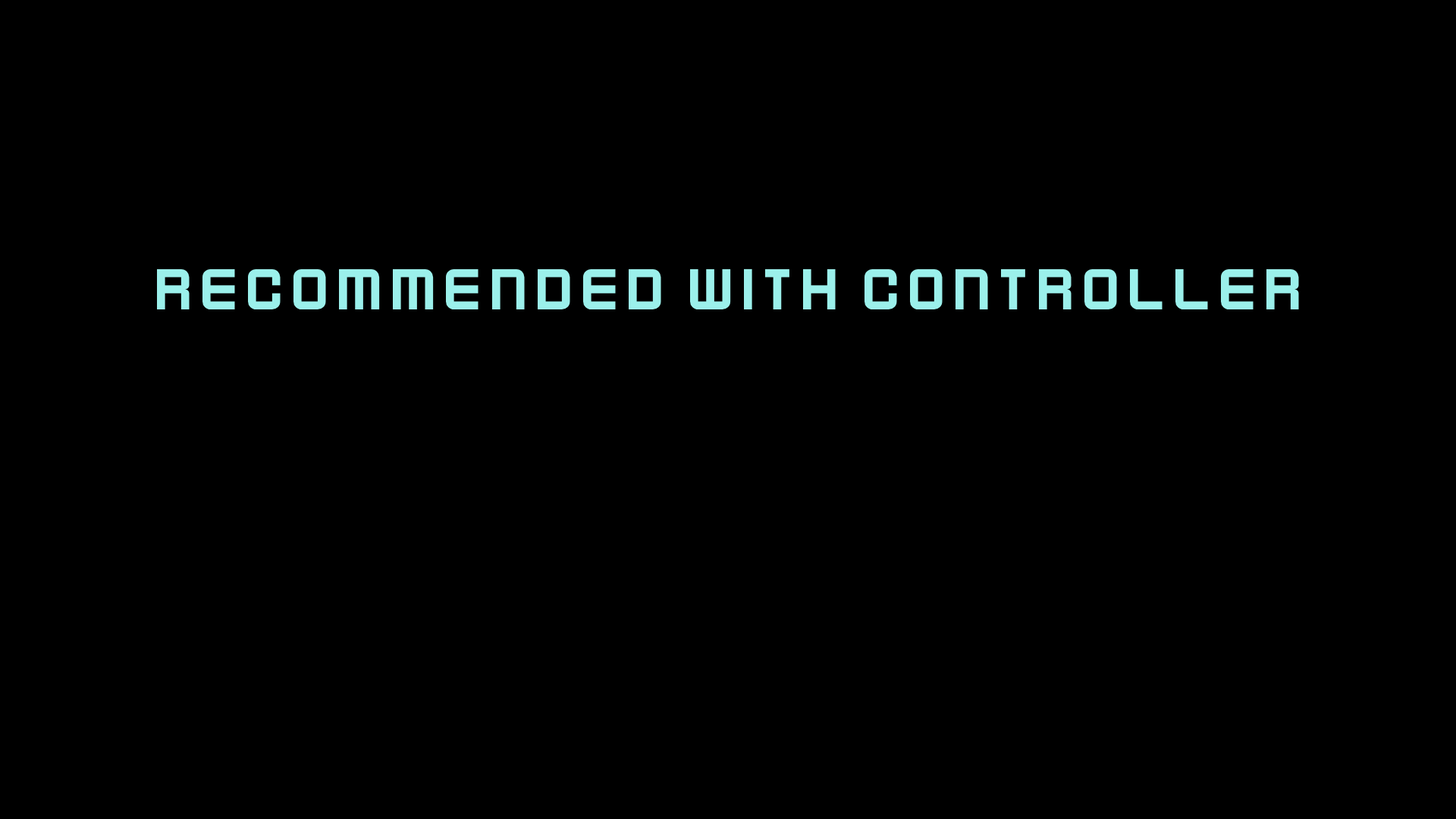
<style>
.page{position:relative;width:1456px;height:819px;background:#000000}
.page>*{position:absolute;margin:0}
.t1{font:64.5px "Kenney-Future-Narrow";color:#9bf0eb}
</style>
<div class="page">
<p class="t1" style="left:157px;top:268px;width:1142px;height:41px">recommended with controller</p>
</div>
